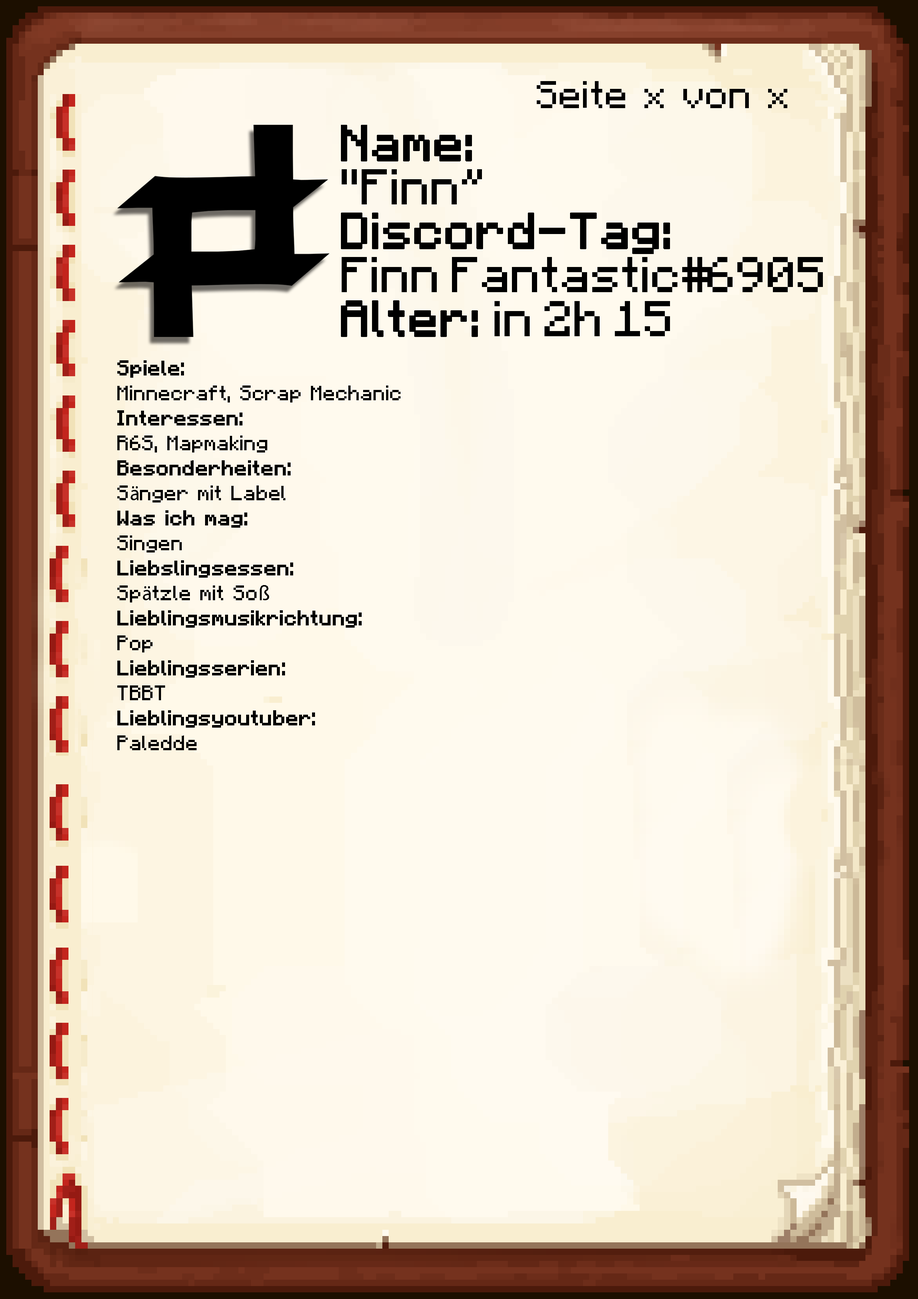
<style>
.page{position:relative;width:918px;height:1299px}
.page>*{position:absolute;margin:0}
.t1{font:38.6px "Minecraft-Regular";color:#000000}
.t2{font:40.1px/43.9px "Minecraft";color:#000000}
.t3{font:40.1px/43.9px "Minecraft";color:#000000;font-weight:bold}
.t4{font:20.8px "Minecraft-Regular";color:#000000}
.t5{font:20.8px "Minecraft-Regular";color:#000000;font-weight:bold}
.t6{font:20.8px "MyriadPro-Regular";color:#000000}
</style>
<div class="page">
<p class="t1" style="left:537px;top:81px;width:250px;height:27px">Seite x von x</p>
<p class="t2" style="left:341px;top:125px;width:482px;height:212px"><span class="t3">Name:<br></span>"Finn”<br><span class="t3">Discord-Tag:<br></span>Finn Fantastic#6905<br><span class="t3">Alter: </span>in 2h 15</p>
<p class="t4" style="left:117px;top:360px;width:284px;height:390px"><span class="t5">Spiele: <br></span>Minnecraft, Scrap Mechanic<br><span class="t5">Interessen:<br></span>R6S, Mapmaking<br><span class="t5">Besonderheiten:<br></span>S<span class="t6">ä</span>nger mit Label<br><span class="t5">Was ich mag:<br></span>Singen<br><span class="t5">Liebslingsessen:<br></span>Sp<span class="t6">ä</span>tzle mit So<span class="t6">ß<br></span><span class="t5">Lieblingsmusikrichtung:<br></span>Pop<br><span class="t5">Lieblingsserien:<br></span>TBBT<br><span class="t5">Lieblingsyoutuber:<br></span>Paledde</p>
</div>
